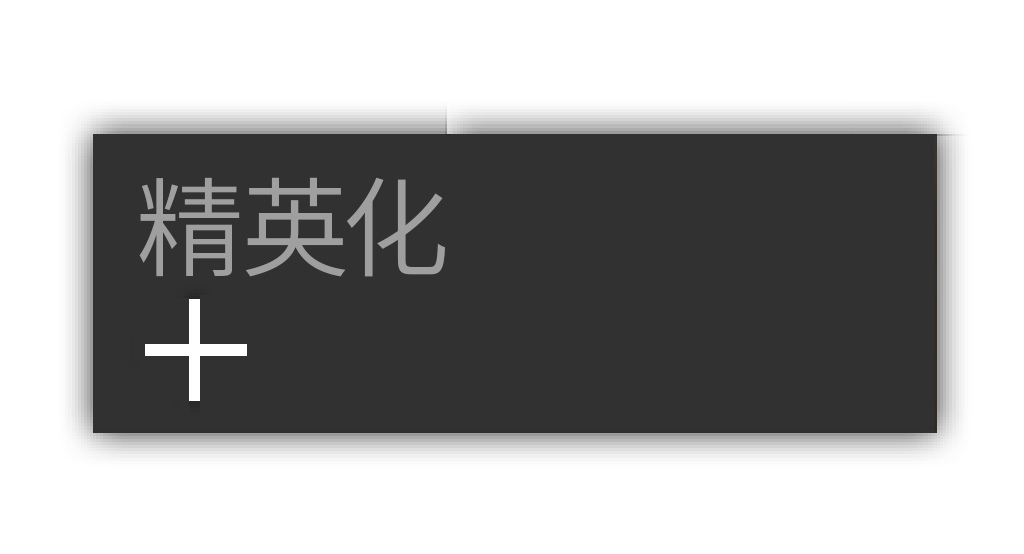
<style>
.page{position:relative;width:1024px;height:554px;background:#313131}
.page>*{position:absolute;margin:0}
.t1{font:108px "SourceHanSansCN-Normal";letter-spacing:0.01em;color:#9f9f9f}
</style>
<div class="page">
<p class="t1" style="left:139px;top:177px;width:306px;height:100px">精英化</p>
</div>
